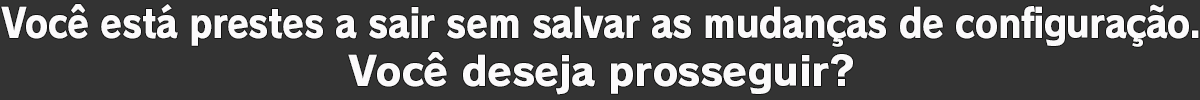
<style>
.page{position:relative;width:1200px;height:100px;background:#333333}
.page>*{position:absolute;margin:0}
.t1{font:40px "RodinPro-EB";letter-spacing:-0.016em;color:#fbfafb;scale:0.88 1}
.t2{font:40px "RodinPro-EB";letter-spacing:-0.015em;color:#fbfafb}
</style>
<div class="page">
<p class="t1" style="left:1px;top:4px;width:1198px;height:43px">Você está prestes a sair sem salvar as mudanças de configuração.</p>
<p class="t2" style="left:348px;top:52px;width:505px;height:43px">Você deseja prosseguir?</p>
</div>
